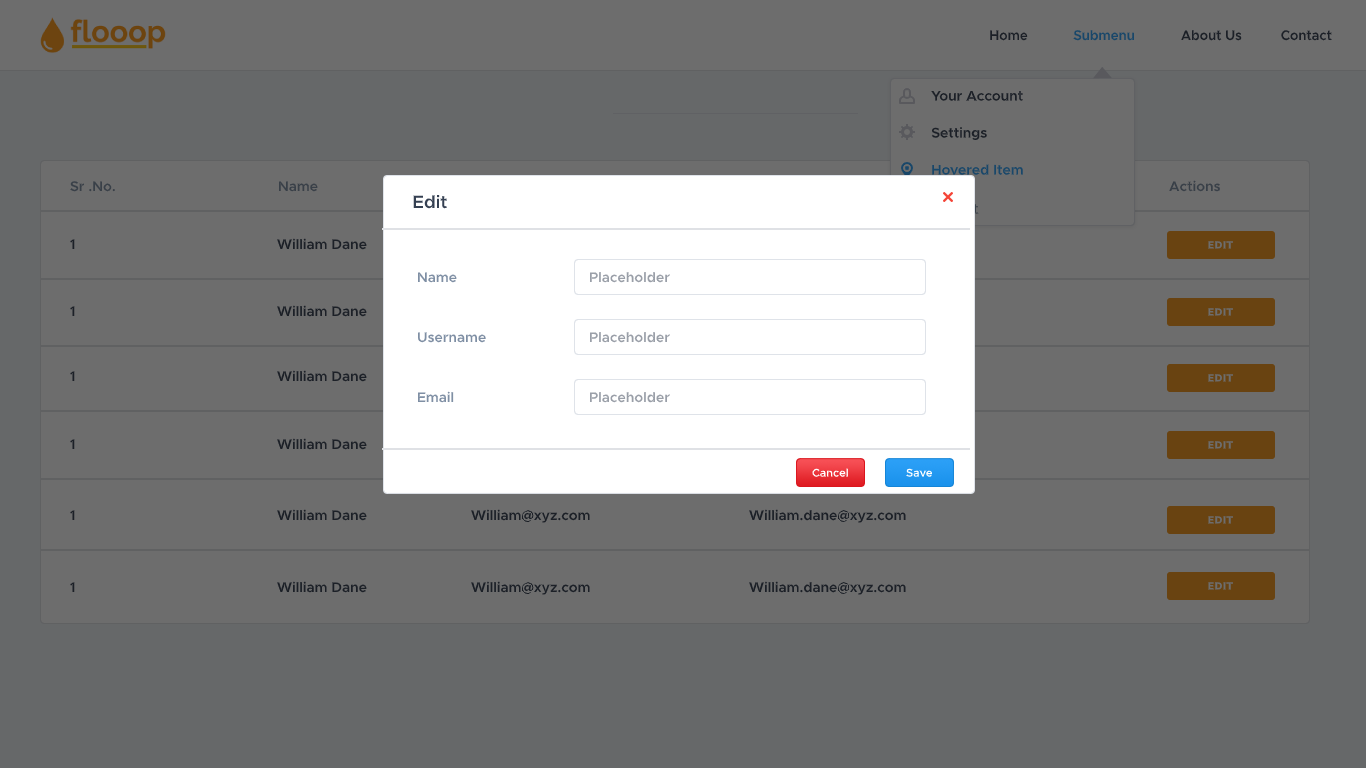
<style>
.page{position:relative;width:1366px;height:768px;background:#6d6d6d}
.page>*{position:absolute;margin:0}
.t1{font:14px "ProximaNova-Semibold";color:#1c2027;scale:0.95 1}
.t2{font:14px "ProximaNova-Semibold";color:#19476a;scale:0.95 1}
.t3{font:14px "ProximaNova-Semibold";color:#1c2027}
.t4{font:14px "ProximaNova-Semibold";color:#19476a}
.t5{font:14px "ProximaNova-Semibold";color:#394048}
.t6{font:18px "ProximaNova-Semibold";color:#354052}
.t7{font:10px "ProximaNova-Bold";color:#6d6d6d;text-transform:uppercase}
.t8{font:14px "ProximaNova-Semibold";color:#7f8fa4}
.t9{font:14px "ProximaNova-Semibold";color:#9a9fa8}
.t10{font:11.2px "ProximaNova-Semibold";color:#ffffff}
</style>
<div class="page">
<p class="t1" style="left:990px;top:30px;width:38px;height:11px">Home</p>
<p class="t2" style="left:1073px;top:30px;width:61px;height:11px">Submenu</p>
<p class="t1" style="left:1181px;top:30px;width:61px;height:11px">About Us</p>
<p class="t1" style="left:1281px;top:30px;width:51px;height:11px">Contact</p>
<p class="t3" style="left:931px;top:91px;width:92px;height:10px">Your Account</p>
<p class="t3" style="left:931px;top:127px;width:56px;height:13px">Settings</p>
<p class="t4" style="left:932px;top:164px;width:91px;height:11px">Hovered Item</p>
<p class="t5" style="left:70px;top:181px;width:45px;height:11px">Sr .No.</p>
<p class="t5" style="left:279px;top:181px;width:39px;height:11px">Name</p>
<p class="t5" style="left:1169px;top:180px;width:52px;height:12px">Actions</p>
<p class="t6" style="left:413px;top:194px;width:34px;height:15px">Edit</p>
<p class="t3" style="left:70px;top:239px;width:5px;height:10px">1</p>
<p class="t3" style="left:277px;top:238px;width:90px;height:12px">William Dane</p>
<p class="t7" style="left:1208px;top:241px;width:26px;height:8px">Edit</p>
<p class="t8" style="left:418px;top:272px;width:39px;height:11px">Name</p>
<p class="t9" style="left:590px;top:272px;width:80px;height:11px">Placeholder</p>
<p class="t3" style="left:277px;top:305px;width:90px;height:12px">William Dane</p>
<p class="t3" style="left:70px;top:306px;width:5px;height:10px">1</p>
<p class="t7" style="left:1208px;top:308px;width:26px;height:8px">Edit</p>
<p class="t8" style="left:418px;top:332px;width:68px;height:11px">Username</p>
<p class="t9" style="left:590px;top:332px;width:80px;height:11px">Placeholder</p>
<p class="t3" style="left:70px;top:371px;width:5px;height:10px">1</p>
<p class="t3" style="left:277px;top:370px;width:90px;height:12px">William Dane</p>
<p class="t7" style="left:1208px;top:374px;width:26px;height:8px">Edit</p>
<p class="t8" style="left:417px;top:391px;width:37px;height:12px">Email</p>
<p class="t9" style="left:590px;top:392px;width:80px;height:11px">Placeholder</p>
<p class="t3" style="left:277px;top:438px;width:90px;height:12px">William Dane</p>
<p class="t3" style="left:70px;top:439px;width:5px;height:10px">1</p>
<p class="t7" style="left:1208px;top:441px;width:26px;height:8px">Edit</p>
<p class="t10" style="left:812px;top:468px;width:36px;height:9px">Cancel</p>
<p class="t10" style="left:906px;top:468px;width:27px;height:9px">Save</p>
<p class="t3" style="left:70px;top:510px;width:5px;height:10px">1</p>
<p class="t3" style="left:277px;top:509px;width:90px;height:12px">William Dane</p>
<p class="t3" style="left:471px;top:509px;width:119px;height:14px">William@xyz.com</p>
<p class="t3" style="left:749px;top:509px;width:157px;height:14px">William.dane@xyz.com</p>
<p class="t7" style="left:1208px;top:516px;width:26px;height:8px">Edit</p>
<p class="t3" style="left:70px;top:582px;width:5px;height:10px">1</p>
<p class="t3" style="left:277px;top:581px;width:90px;height:12px">William Dane</p>
<p class="t3" style="left:471px;top:581px;width:119px;height:14px">William@xyz.com</p>
<p class="t3" style="left:749px;top:581px;width:157px;height:14px">William.dane@xyz.com</p>
<p class="t7" style="left:1208px;top:582px;width:26px;height:8px">Edit</p>
</div>
